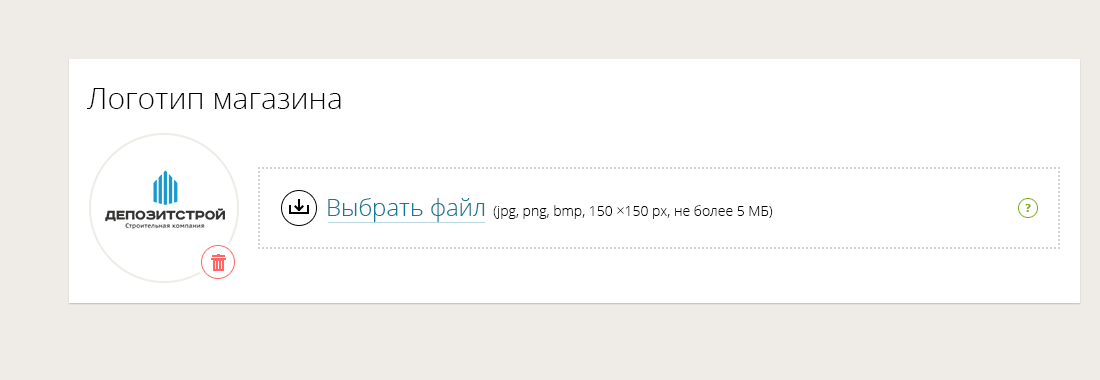
<style>
.page{position:relative;width:1100px;height:380px;background:#ffffff}
.page>*{position:absolute;margin:0}
.t1{font:30px "OpenSans-Light";color:#000000}
.t2{font:14px "OpenSans-Light";color:#000000}
.t3{font:24px "OpenSans-Light";color:#177a93}
.t4{font:11px "OpenSans-Extrabold";color:#7caa1f}
</style>
<div class="page">
<p class="t1" style="left:86px;top:88px;width:255px;height:21px">Логотип магазина</p>
<p class="t2" style="left:328px;top:198px;width:445px;height:24px"><span class="t3">Выбрать файл</span>  (jpg, png, bmp, 150 ×150 px, не более 5 МБ)</p>
<p class="t4" style="left:1025px;top:204px;width:6px;height:8px">?</p>
</div>
